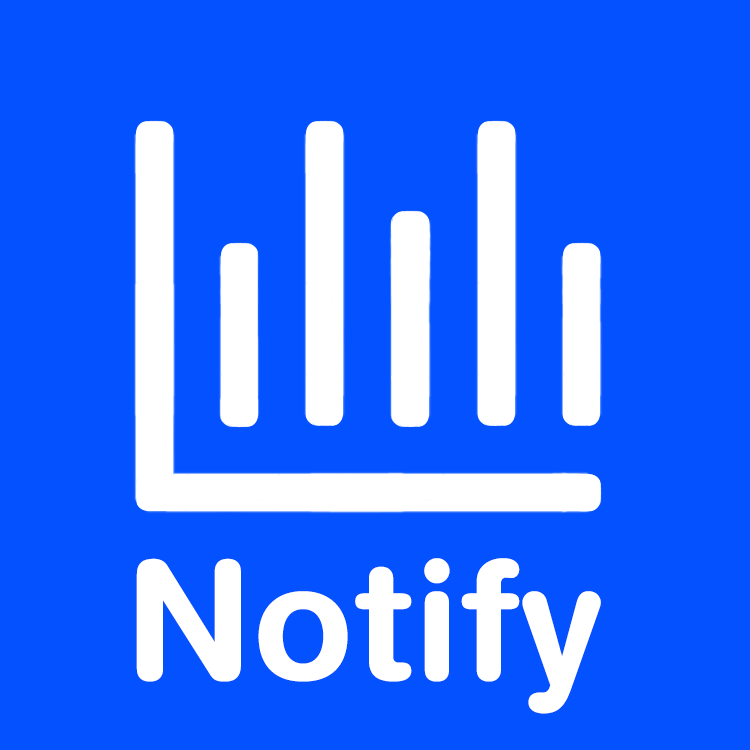
<style>
.page{position:relative;width:750px;height:750px;background:#0452ff}
.page>*{position:absolute;margin:0}
.t1{font:164.3px "HelveticaRounded-Bold";color:#ffffff}
</style>
<div class="page">
<p class="t1" style="left:136px;top:558px;width:465px;height:156px">Notify</p>
</div>
